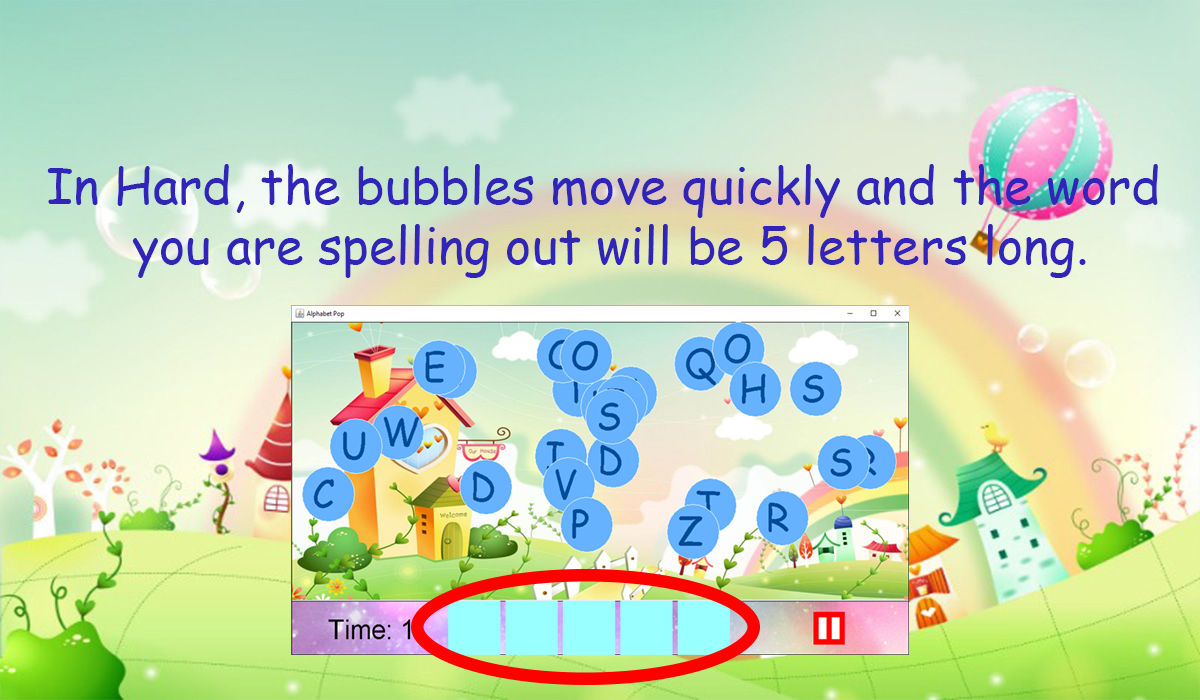
<style>
.page{position:relative;width:1200px;height:700px}
.page>*{position:absolute;margin:0}
.t1{font:12px "ComicSansMS";color:#3124b9}
</style>
<div class="page">
<p class="t1" style="left:47px;top:164px;width:1111px;height:114px;text-align:center">In Hard, the bubbles move quickly and the word <br>you are spelling out will be 5 letters long.</p>
</div>
